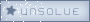
<style>
.page{position:relative;width:90px;height:22px}
.page>*{position:absolute;margin:0}
.t1{font:14.3px "BNExpoo";letter-spacing:0.2em;color:#697a95;scale:0.91 1}
</style>
<div class="page">
<p class="t1" style="left:21px;top:8px;width:58px;height:8px">UNSOLVE</p>
</div>
